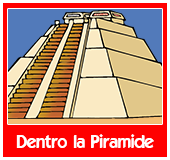
<style>
.page{position:relative;width:170px;height:160px;background:#ff0000}
.page>*{position:absolute;margin:0}
.t1{font:18px "ELEGANCE";color:#ffffff}
</style>
<div class="page">
<p class="t1" style="left:16px;top:134px;width:138px;height:14px">Dentro la Piramide</p>
</div>
